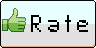
<style>
.page{position:relative;width:96px;height:48px;background:#e8ffff}
.page>*{position:absolute;margin:0}
.t1{font:24px "SFPixelate";color:#000000}
</style>
<div class="page">
<p class="t1" style="left:31px;top:15px;width:57px;height:17px">Rate</p>
</div>
